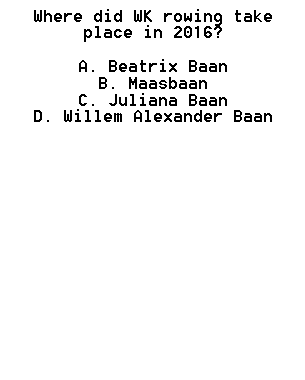
<style>
.page{position:relative;width:305px;height:380px;background:#ffffff}
.page>*{position:absolute;margin:0}
.t1{font:14px "8514oem";color:#000000}
</style>
<div class="page">
<p class="t1" style="left:34px;top:9px;width:238px;height:113px;text-align:center">Where did WK rowing take place in 2016? <br><br>A. Beatrix Baan <br>B. Maasbaan <br>C. Juliana Baan <br>D. Willem Alexander Baan</p>
</div>
